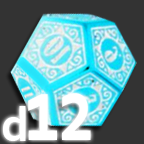
<style>
.page{position:relative;width:144px;height:144px;background:#333333}
.page>*{position:absolute;margin:0}
.t1{font:96.5px "Corbel-Bold";color:#ffffff;scale:0.72 1}
.t2{font:64.3px "Corbel-Bold";color:#ffffff;scale:0.72 1}
.t3{font:50px "Corbel-Bold";color:#ffffff}
</style>
<div class="page">
<p class="t1" style="left:28px;top:93px;width:63px;height:47px"><span class="t2">  </span>12</p>
<p class="t3" style="left:3px;top:106px;width:23px;height:35px">d</p>
</div>
